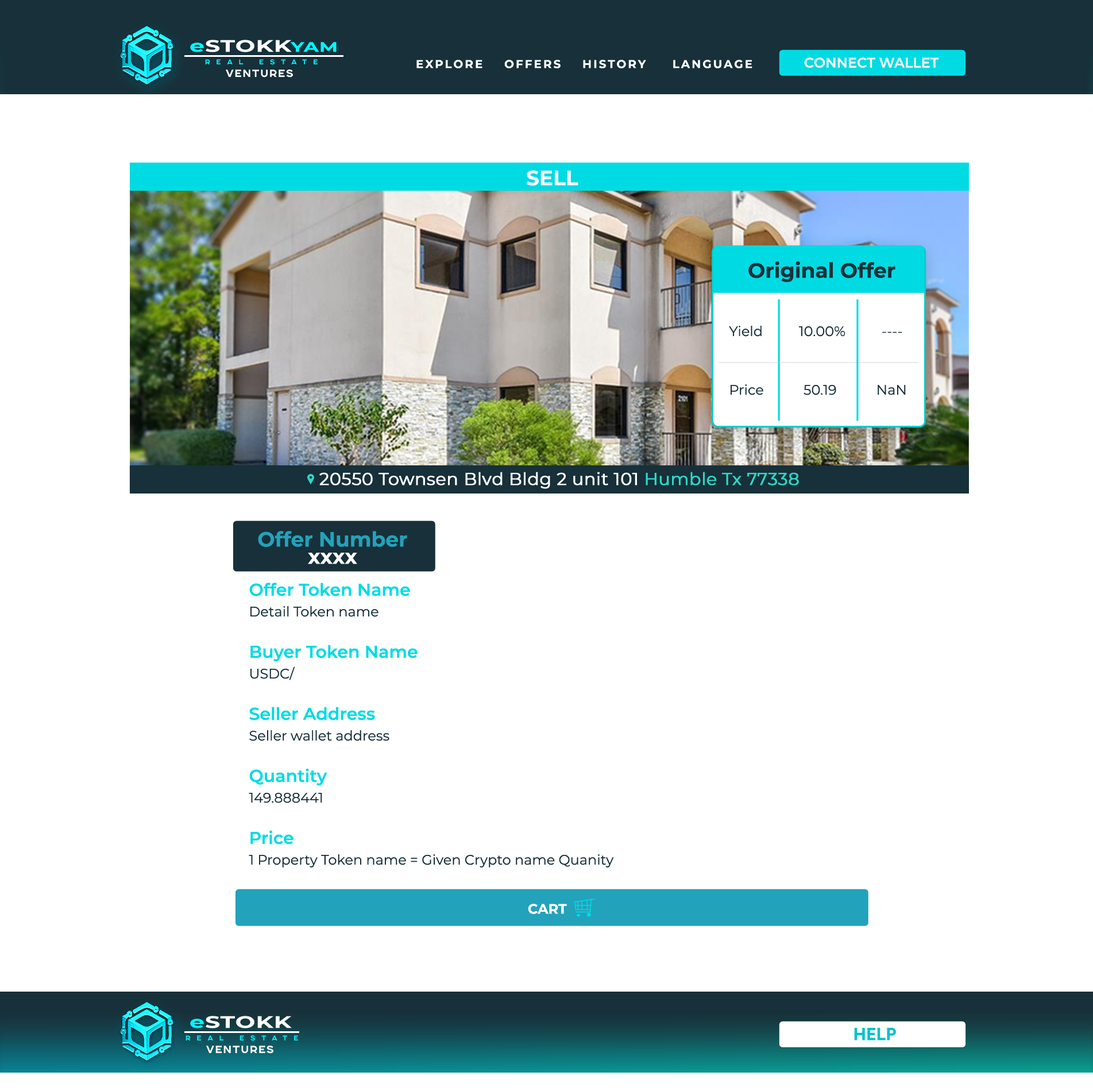
<style>
.page{position:relative;width:1093px;height:1091px;background:#ffffff}
.page>*{position:absolute;margin:0}
.t1{font:16.6px "Montserrat-Bold";letter-spacing:0.025em;color:#ffffff;text-transform:uppercase;scale:1.42 1}
.t2{font:16.6px "Montserrat-Bold";letter-spacing:0.025em;color:#00f6ff;scale:1.42 1}
.t3{font:13.8px "Montserrat-Bold";letter-spacing:0.025em;color:#00f6ff;scale:1.42 1}
.t4{font:6.9px "SONGERSemiExpanded-ExtraBold";letter-spacing:0.9em;color:#00f6ff}
.t5{font:11.5px "Montserrat-Bold";letter-spacing:0.15em;color:#ffffff;text-transform:uppercase}
.t6{font:13.8px "Montserrat-SemiBold";color:#ffffff;text-transform:uppercase}
.t7{font:10.3px "SONGERSemiExpanded-ExtraBold";letter-spacing:0.1em;color:#ffffff}
.t8{font:20.7px "Montserrat-Bold";color:#ffffff;text-transform:uppercase}
.t9{font:20.7px "Montserrat-Bold";color:#173039}
.t10{font:13.8px "Montserrat-Regular";color:#173039}
.t11{font:17.2px "Montserrat-Regular";color:#ffffff;font-weight:bold}
.t12{font:17.2px "Montserrat-Regular";color:#2dd8c8;font-weight:bold}
.t13{font:20.7px/17.2px "Montserrat-Bold";color:#23a2bb}
.t14{font:20.7px/17.2px "Montserrat-Bold";color:#ffffff}
.t15{font:13.8px/20.7px "Montserrat-Regular";color:#173039}
.t16{font:17.2px/20.7px "Montserrat-SemiBold";color:#00dbe3}
.t17{font:13.8px "Montserrat-Bold";color:#ffffff;text-transform:uppercase}
.t18{font:17.2px "CircularStd-Bold";color:#00c1c9}
</style>
<div class="page">
<p class="t1" style="left:190px;top:40px;width:147px;height:12px"><span class="t2">e</span>STOKK<span class="t3">YAM</span></p>
<p class="t4" style="left:205px;top:59px;width:113px;height:6px">REAL ESTATE</p>
<p class="t5" style="left:416px;top:60px;width:336px;height:8px">Explore    Offers    History     Language</p>
<p class="t6" style="left:804px;top:57px;width:135px;height:11px">connect wallet</p>
<p class="t7" style="left:226px;top:70px;width:67px;height:8px">VENTUREs</p>
<p class="t8" style="left:526px;top:170px;width:52px;height:16px">Sell</p>
<p class="t9" style="left:748px;top:261px;width:148px;height:21px">Original Offer</p>
<p class="t10" style="left:729px;top:326px;width:173px;height:11px">Yield          10.00%          ----</p>
<p class="t10" style="left:731px;top:384px;width:175px;height:11px">Price           50.19           NaN</p>
<p class="t11" style="left:319px;top:472px;width:480px;height:17px">20550 Townsen Blvd Bldg 2 unit 101 <span class="t12">Humble Tx 77338</span></p>
<p class="t13" style="left:258px;top:531px;width:149px;height:33px;text-align:center">Offer Number <br><span class="t14">xxxx</span></p>
<p class="t15" style="left:249px;top:582px;width:365px;height:285px"><span class="t16">Offer Token Name<br></span>Detail Token name<br><br><span class="t16">Buyer Token Name<br></span>USDC/<br><br><span class="t16">Seller Address<br></span>Seller wallet address<br><br><span class="t16">Quantity<br></span>149.888441<br><br><span class="t16">Price<br></span>1 Property Token name = Given Crypto name Quanity</p>
<p class="t17" style="left:528px;top:904px;width:39px;height:10px">CART</p>
<p class="t1" style="left:190px;top:1016px;width:102px;height:12px"><span class="t2">e</span>STOKK</p>
<p class="t4" style="left:186px;top:1035px;width:112px;height:6px">REAL ESTATE</p>
<p class="t18" style="left:854px;top:1028px;width:42px;height:12px">HELP</p>
<p class="t7" style="left:206px;top:1045px;width:67px;height:8px">VENTUREs</p>
</div>
